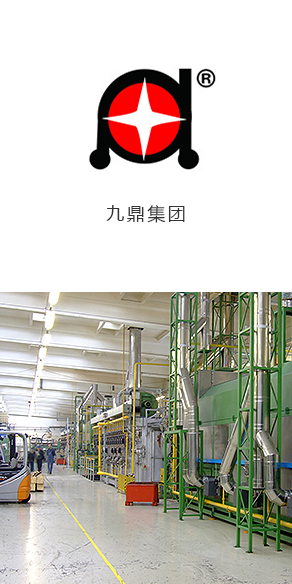
<style>
.page{position:relative;width:292px;height:584px;background:#ffffff}
.page>*{position:absolute;margin:0}
.t1{font:18px "MicrosoftYaHei";letter-spacing:0.14em;color:#333333}
</style>
<div class="page">
<p class="t1" style="left:106px;top:205px;width:79px;height:18px">九鼎集团</p>
</div>
